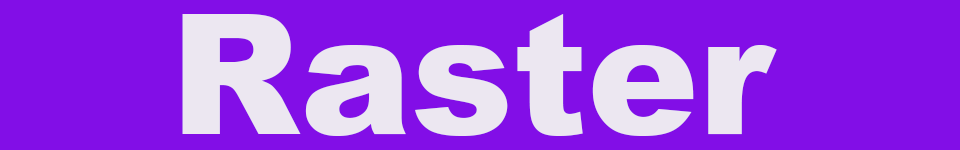
<style>
.page{position:relative;width:960px;height:150px;background:#820ee7}
.page>*{position:absolute;margin:0}
.t1{font:166.7px "Arial-Black";color:#ece7f1}
</style>
<div class="page">
<p class="t1" style="left:182px;top:14px;width:595px;height:122px">Raster</p>
</div>
